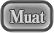
<style>
.page{position:relative;width:54px;height:33px}
.page>*{position:absolute;margin:0}
.t1{font:17px "RyuminPro-ExBold";letter-spacing:-0.08em;color:#dad3d1;font-weight:bold;scale:0.9 1}
</style>
<div class="page">
<p class="t1" style="left:10px;top:10px;width:36px;height:13px">Muat</p>
</div>
